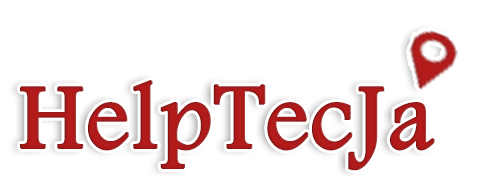
<style>
.page{position:relative;width:480px;height:187px;background:#ffffff}
.page>*{position:absolute;margin:0}
.t1{font:96px "FootlightMTLight";color:#ac1a1a;font-weight:bold}
</style>
<div class="page">
<p class="t1" style="left:20px;top:80px;width:415px;height:91px">HelpTecJa</p>
</div>
